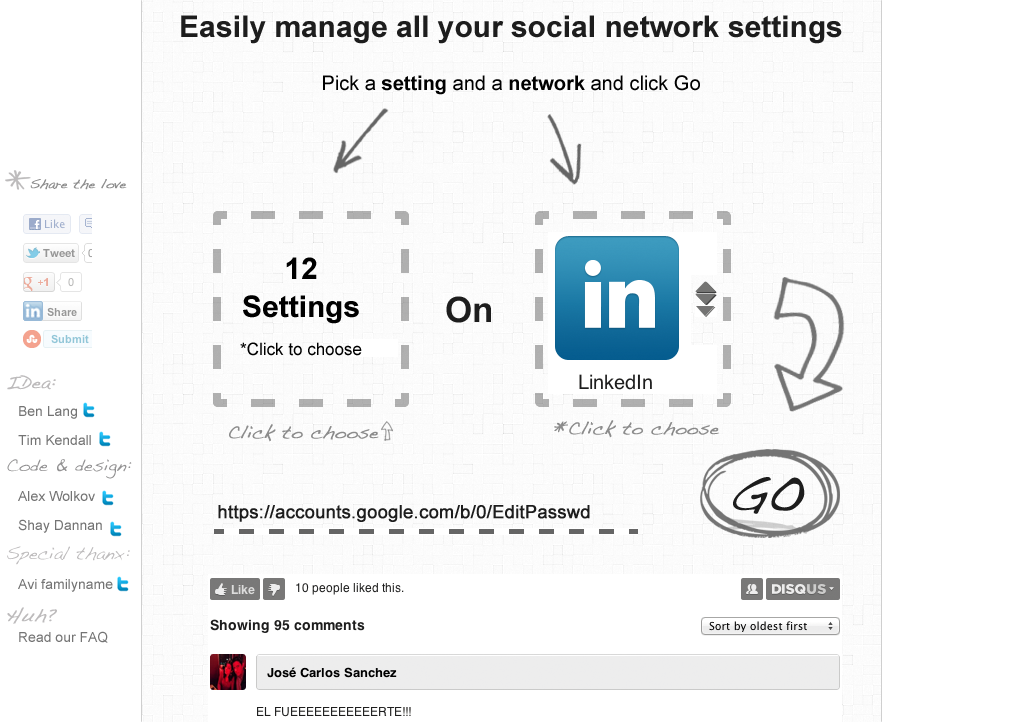
<style>
.page{position:relative;width:1024px;height:722px;background:#ffffff}
.page>*{position:absolute;margin:0}
.t1{font:30px "Arial-BoldMT";color:#1d1d1d}
.t2{font:20px "ArialMT";color:#000000}
.t3{font:20px "Arial-BoldMT";color:#000000}
.t4{font:13px "Handwriting-Dakota";color:#8e8e8e;font-weight:bold}
.t5{font:17px/38px "ArialMT";color:#000000}
.t6{font:30px/38px "Arial-BoldMT";color:#000000}
.t7{font:35px "Arial-BoldMT";color:#1d1d1d}
.t8{font:18px "Handwriting-Dakota";color:#bdbbbc;font-weight:bold}
.t9{font:14px/29px "ArialMT";color:#747474}
.t10{font:18px "Handwriting-Dakota";color:#8c8c8c;font-weight:bold}
.t11{font:18px "Handwriting-Dakota";color:#939293}
.t12{font:45px "Handwriting-Dakota";color:#1d1d1d;font-weight:bold}
.t13{font:18px "ArialMT";color:#1d1d1d;font-weight:bold}
.t14{font:18px "Handwriting-Dakota";color:#bdbbbc}
.t15{font:14px "ArialMT";color:#747474}
</style>
<div class="page">
<p class="t1" style="left:181px;top:15px;width:661px;height:29px">Easily manage all your social network settings</p>
<p class="t2" style="left:323px;top:75px;width:377px;height:20px">Pick a <span class="t3">setting </span>and a <span class="t3">network </span>and click Go</p>
<p class="t4" style="left:30px;top:179px;width:97px;height:11px">Share the love</p>
<p class="t5" style="left:240px;top:257px;width:122px;height:99px;text-align:center"><span class="t6">12 Settings<br></span>*Click to choose</p>
<p class="t7" style="left:446px;top:296px;width:45px;height:27px">On</p>
<p class="t8" style="left:7px;top:375px;width:49px;height:15px">IDea:</p>
<p class="t9" style="left:18px;top:406px;width:73px;height:39px">Ben Lang<br>Tim Kendall</p>
<p class="t10" style="left:229px;top:424px;width:150px;height:18px">Click to choose</p>
<p class="t10" style="left:554px;top:420px;width:165px;height:18px">*Click to choose</p>
<p class="t11" style="left:7px;top:459px;width:125px;height:20px">Code &amp; design:</p>
<p class="t12" style="left:733px;top:477px;width:72px;height:37px">GO</p>
<p class="t9" style="left:18px;top:491px;width:84px;height:42px">Alex Wolkov<br>Shay Dannan</p>
<p class="t13" style="left:218px;top:505px;width:372px;height:17px">https://accounts.google.com/b/0/EditPasswd</p>
<p class="t14" style="left:7px;top:546px;width:123px;height:19px">Special thanx:</p>
<p class="t15" style="left:18px;top:579px;width:95px;height:13px">Avi familyname</p>
<p class="t8" style="left:7px;top:607px;width:50px;height:17px">Huh?</p>
<p class="t15" style="left:19px;top:631px;width:89px;height:12px">Read our FAQ</p>
</div>
